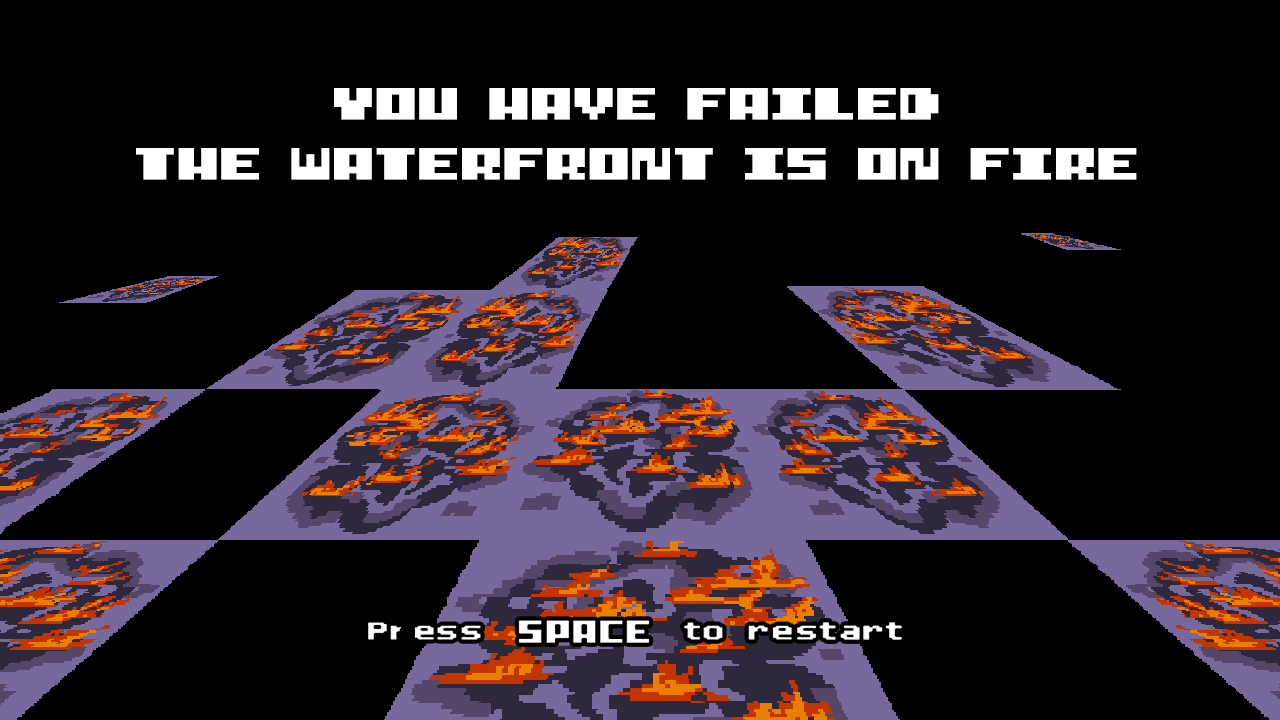
<style>
.page{position:relative;width:1280px;height:720px;background:#000000}
.page>*{position:absolute;margin:0}
.t1{font:50px "I-pixel-u";letter-spacing:-0.04em;color:#ffffff;scale:1.2 1}
</style>
<div class="page">
<p class="t1" style="left:136px;top:88px;width:1001px;height:92px;text-align:center">YOU HAVE FAILED<br>THE WATERFRONT IS ON FIRE</p>
</div>
